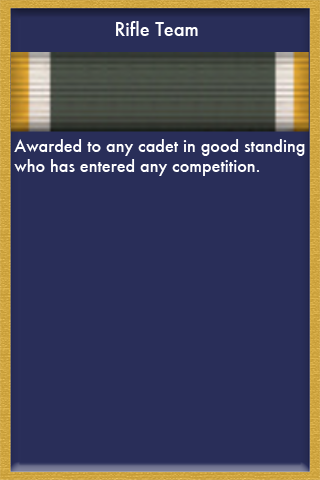
<style>
.page{position:relative;width:320px;height:480px;background:#292e59}
.page>*{position:absolute;margin:0}
.t1{font:18px "Futura-Medium";color:#ffffff}
.t2{font:16px "Futura-Medium";color:#ffffff}
</style>
<div class="page">
<p class="t1" style="left:116px;top:21px;width:82px;height:15px">Rifle Team</p>
<p class="t2" style="left:14px;top:139px;width:291px;height:37px">Awarded to any cadet in good standing <br>who has entered any competition.</p>
</div>
